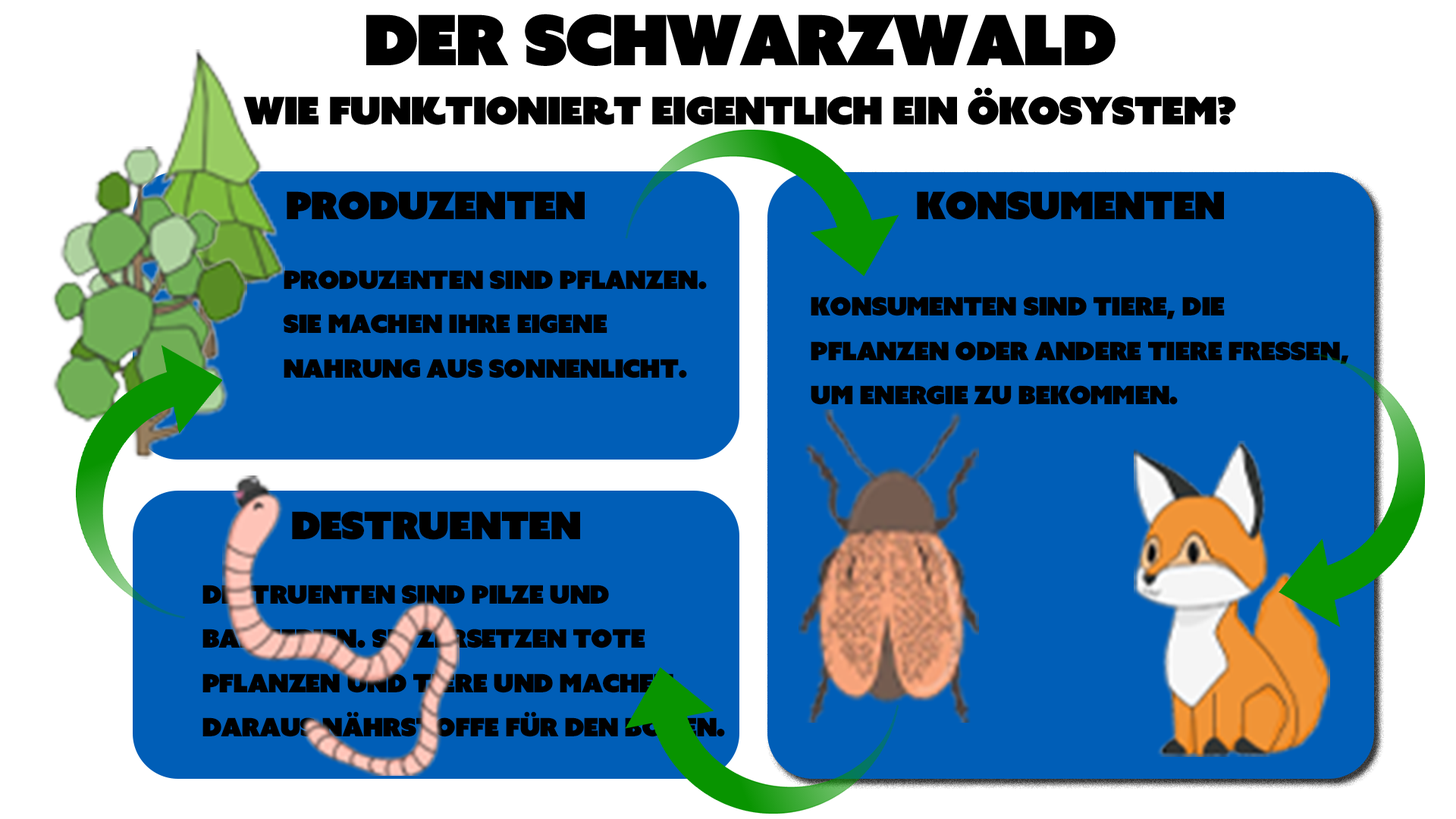
<style>
.page{position:relative;width:1456px;height:819px;background:#005eb7}
.page>*{position:absolute;margin:0}
.t1{font:69.5px "AzoSansUber-Regular";letter-spacing:-0.04em;color:#000000}
.t2{font:37.9px "AzoSansUber-Regular";letter-spacing:-0.04em;color:#000000}
.t3{font:25.3px "AzoSansUber-Regular";letter-spacing:-0.04em;color:#000000}
</style>
<div class="page">
<p class="t1" style="left:366px;top:14px;width:749px;height:52px">DER SCHWARZWALD</p>
<p class="t2" style="left:243px;top:87px;width:993px;height:38px">Wie funktioniert eigentlich ein Ökosystem?</p>
<p class="t2" style="left:287px;top:191px;width:298px;height:29px">PRODUZENTEN</p>
<p class="t2" style="left:917px;top:191px;width:307px;height:29px">KONSUMENTEN</p>
<p class="t3" style="left:283px;top:270px;width:424px;height:108px">Produzenten sind Pflanzen. <br>Sie machen ihre eigene <br>Nahrung aus Sonnenlicht.</p>
<p class="t3" style="left:811px;top:297px;width:538px;height:108px">Konsumenten sind Tiere, die <br>Pflanzen oder andere Tiere fressen, <br>um Energie zu bekommen.</p>
<p class="t2" style="left:292px;top:511px;width:288px;height:29px">DESTRUENTEN</p>
<p class="t3" style="left:202px;top:585px;width:523px;height:152px">Destruenten sind Pilze und <br>Bakterien. Sie zersetzen tote  <br>Pflanzen und Tiere und machen <br>daraus Nährstoffe für den Boden.</p>
</div>
